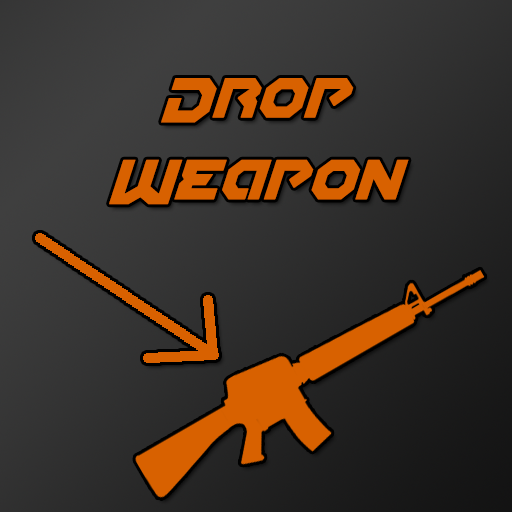
<style>
.page{position:relative;width:512px;height:512px}
.page>*{position:absolute;margin:0}
.t1{font:68px "GunnerStormDropItalic";color:#d86100}
</style>
<div class="page">
<p class="t1" style="left:109px;top:78px;width:300px;height:127px;text-align:center">Drop<br>Weapon</p>
</div>
